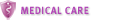
<style>
.page{position:relative;width:129px;height:20px;background:#ffffff}
.page>*{position:absolute;margin:0}
.t1{font:10px "MetaBoldC";letter-spacing:0.05em;color:#b346b7;text-transform:uppercase}
</style>
<div class="page">
<p class="t1" style="left:21px;top:6px;width:68px;height:8px">MEDICAL CARE</p>
</div>
